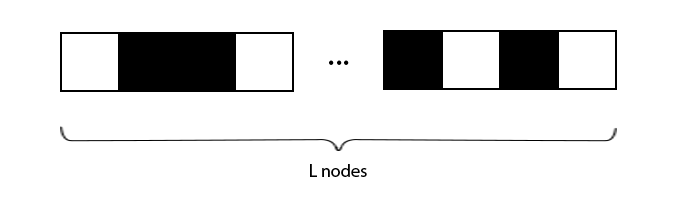
<style>
.page{position:relative;width:677px;height:207px;background:#ffffff}
.page>*{position:absolute;margin:0}
.t1{font:36px "MyriadPro-Regular";color:#000000}
.t2{font:18px "MyriadPro-Regular";color:#000000}
</style>
<div class="page">
<p class="t1" style="left:329px;top:60px;width:20px;height:5px">...</p>
<p class="t2" style="left:310px;top:164px;width:57px;height:13px">L nodes</p>
</div>
